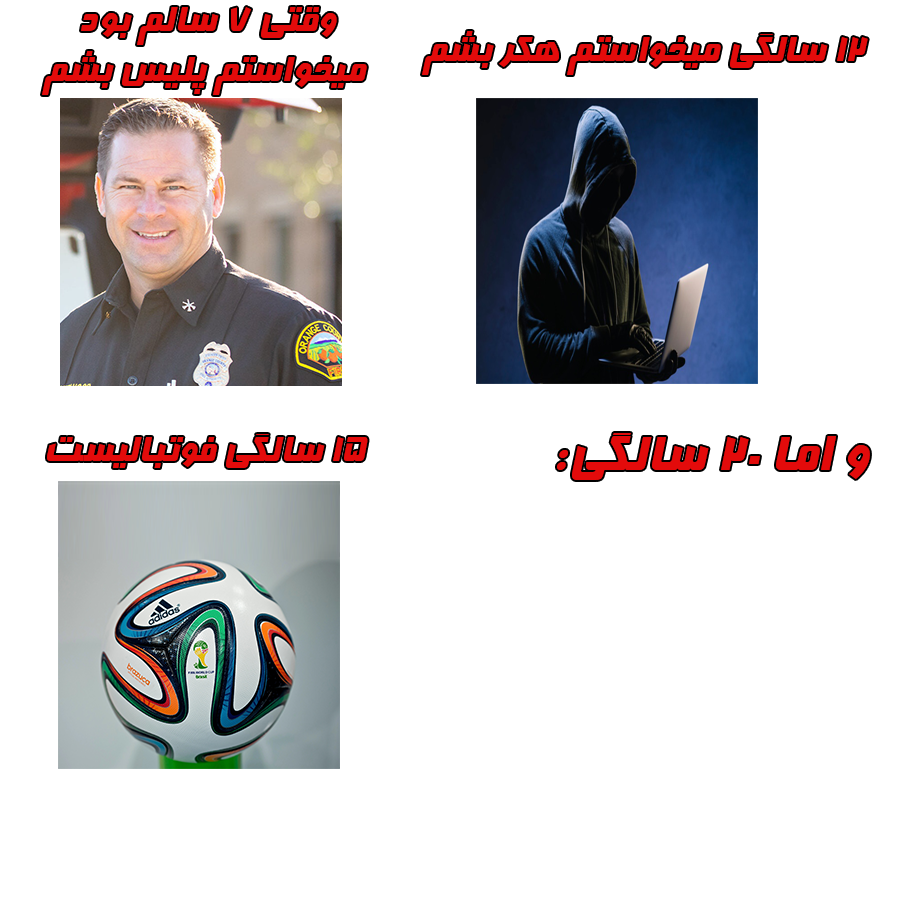
<style>
.page{position:relative;width:900px;height:900px;background:#ffffff}
.page>*{position:absolute;margin:0}
.t1{font:41.7px "Far.Farnaz";color:#e30b0b}
.t2{font:58.3px "Far.Farnaz";color:#e30b0b}
</style>
<div class="page">
<p class="t1" style="left:42px;top:7px;width:325px;height:88px;text-align:center">وقتی 7 سالم بود<br> میخواستم پلیس بشم</p>
<p class="t1" style="left:422px;top:31px;width:446px;height:44px">12 سالگی میخواستم هکر بشم</p>
<p class="t1" style="left:47px;top:434px;width:321px;height:34px">15 سالگی فوتبالیست</p>
<p class="t2" style="left:557px;top:433px;width:313px;height:47px">و اما 20 سالگی:</p>
</div>
